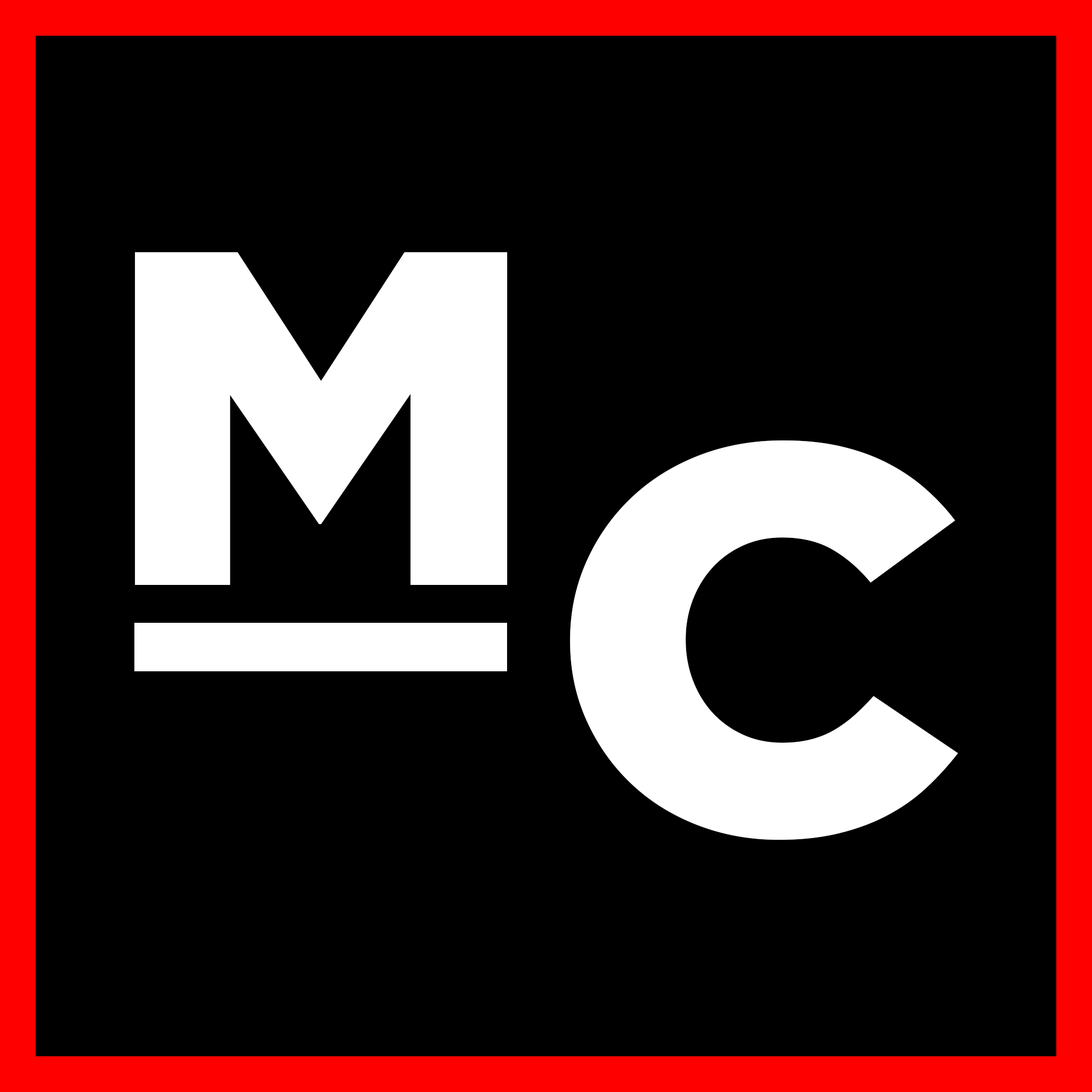
<style>
.page{position:relative;width:1092px;height:1092px;background:#000000}
.page>*{position:absolute;margin:0}
.t1{font:475.1px "GothamBlack";letter-spacing:0.02em;color:#ffffff;scale:1.05 1}
.t2{font:549.1px "GothamBlack";letter-spacing:0.02em;color:#ffffff;scale:1.05 1}
</style>
<div class="page">
<p class="t1" style="left:135px;top:252px;width:373px;height:333px">M</p>
<p class="t2" style="left:570px;top:440px;width:388px;height:400px">C</p>
</div>
